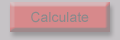
<style>
.page{position:relative;width:120px;height:40px;background:#d7898b}
.page>*{position:absolute;margin:0}
.t1{font:14px "ArialMT";color:#8b898b}
</style>
<div class="page">
<p class="t1" style="left:31px;top:11px;width:58px;height:12px">Calculate</p>
</div>
